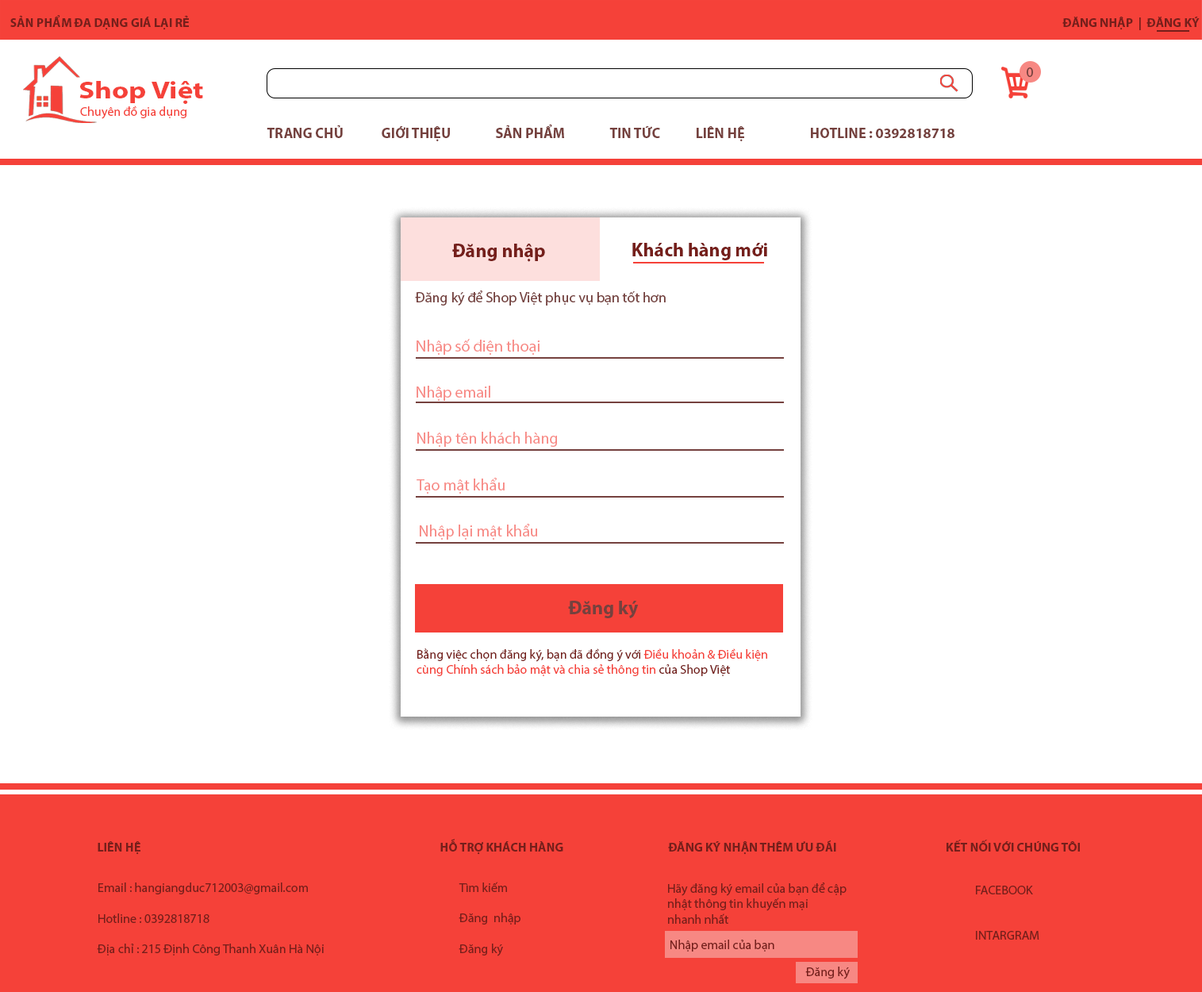
<style>
.page{position:relative;width:1202px;height:992px;background:#ffffff}
.page>*{position:absolute;margin:0}
.t1{font:12.7px "MyriadPro-Bold";color:#751f1b}
.t2{font:14.3px "MyriadPro-Regular";color:#75413e}
.t3{font:24.7px "MyriadPro-Bold";color:#f54139;scale:1.19 1}
.t4{font:12.7px "MyriadPro-Regular";color:#f54139}
.t5{font:12.7px "MyriadPro-Regular";color:#ffffff}
.t6{font:14.3px "MyriadPro-Bold";color:#75413e}
.t7{font:19px "MyriadPro-Bold";color:#751f1b}
.t8{font:15.9px "MyriadPro-Regular";color:#f78883}
.t9{font:19px "MyriadPro-Bold";color:#75413e}
.t10{font:12.7px "MyriadPro-Regular";color:#751f1b}
.t11{font:12.7px "MyriadPro-Bold";color:#751f1b;text-transform:uppercase}
</style>
<div class="page">
<p class="t1" style="left:10px;top:15px;width:179px;height:15px">SẢN PHẨM ĐA DẠNG GIÁ LẠI RẺ</p>
<p class="t1" style="left:1063px;top:17px;width:137px;height:13px">ĐĂNG NHẬP  |  ĐĂNG KÝ</p>
<p class="t2" style="left:1027px;top:67px;width:6px;height:10px">0</p>
<p class="t3" style="left:79px;top:81px;width:124px;height:23px">Shop Việt</p>
<p class="t4" style="left:75px;top:106px;width:111px;height:13px"><span class="t5">s</span>Chuyên đồ gia dụng</p>
<p class="t6" style="left:267px;top:124px;width:688px;height:17px">TRANG CHỦ   GIỚI THIỆU  SẢN PHẨM   TIN TỨC  LIÊN HỆ   HOTLINE : 0392818718</p>
<p class="t7" style="left:452px;top:244px;width:93px;height:18px">Đăng nhập</p>
<p class="t7" style="left:632px;top:243px;width:135px;height:17px">Khách hàng mới</p>
<p class="t2" style="left:415px;top:290px;width:251px;height:16px">Đăng ký để Shop Việt phục vụ bạn tốt hơn</p>
<p class="t8" style="left:417px;top:339px;width:123px;height:16px">Nhập số điện thoại</p>
<p class="t8" style="left:417px;top:386px;width:73px;height:15px">Nhập email</p>
<p class="t8" style="left:417px;top:432px;width:140px;height:15px">Nhập tên khách hàng</p>
<p class="t8" style="left:417px;top:478px;width:88px;height:16px">Tạo mật khẩu</p>
<p class="t8" style="left:420px;top:524px;width:117px;height:16px">Nhập lại mật khẩu</p>
<p class="t9" style="left:568px;top:601px;width:71px;height:17px">Đăng ký</p>
<p class="t4" style="left:417px;top:648px;width:350px;height:28px"><span class="t10">Bằng việc chọn đăng ký, bạn đã đồng ý với </span>Điều khoản &amp; Điều kiện cùng Chính sách bảo mật và chia sẻ thông tin <span class="t10">của Shop Việt</span></p>
<p class="t11" style="left:98px;top:839px;width:982px;height:16px"><span class="t1">LIÊN HỆ             HỖ TRỢ KHÁCH HÀNG     </span>Đăng ký nhận thêm ưu đãi             Kết nối với chúng tôi</p>
<p class="t10" style="left:459px;top:882px;width:62px;height:74px">Tìm kiếm<br><br>Đăng  nhập<br><br>Đăng ký</p>
<p class="t10" style="left:97px;top:882px;width:227px;height:73px">Email : hangiangduc712003@gmail.com<br><br>Hotline : 0392818718<br><br>Địa chỉ : 215 Định Công Thanh Xuân Hà Nội</p>
<p class="t10" style="left:668px;top:882px;width:179px;height:42px">Hãy đăng ký email của bạn để cập <br>nhật thông tin khuyến mại<br>nhanh nhất</p>
<p class="t10" style="left:976px;top:886px;width:64px;height:54px">FACEBOOK<br><br><br>INTARGRAM</p>
<p class="t10" style="left:671px;top:940px;width:103px;height:11px">Nhập email của bạn</p>
<p class="t10" style="left:805px;top:967px;width:45px;height:12px">Đăng ký</p>
</div>
